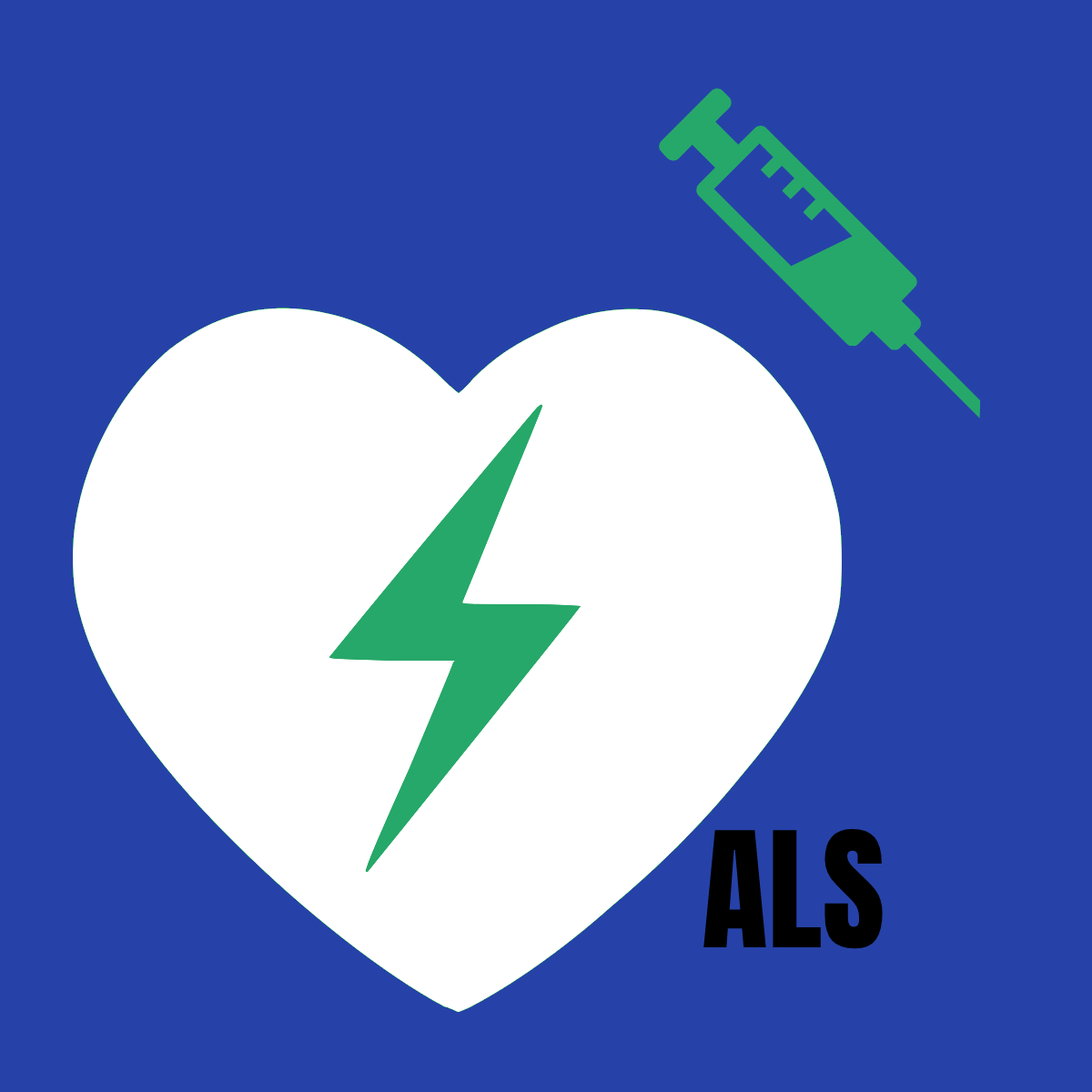
<style>
.page{position:relative;width:1092px;height:1092px;background:#2642a8}
.page>*{position:absolute;margin:0}
.t1{font:136.5px "Anton-Regular";color:#000000}
</style>
<div class="page">
<p class="t1" style="left:703px;top:828px;width:180px;height:121px">ALS</p>
</div>
